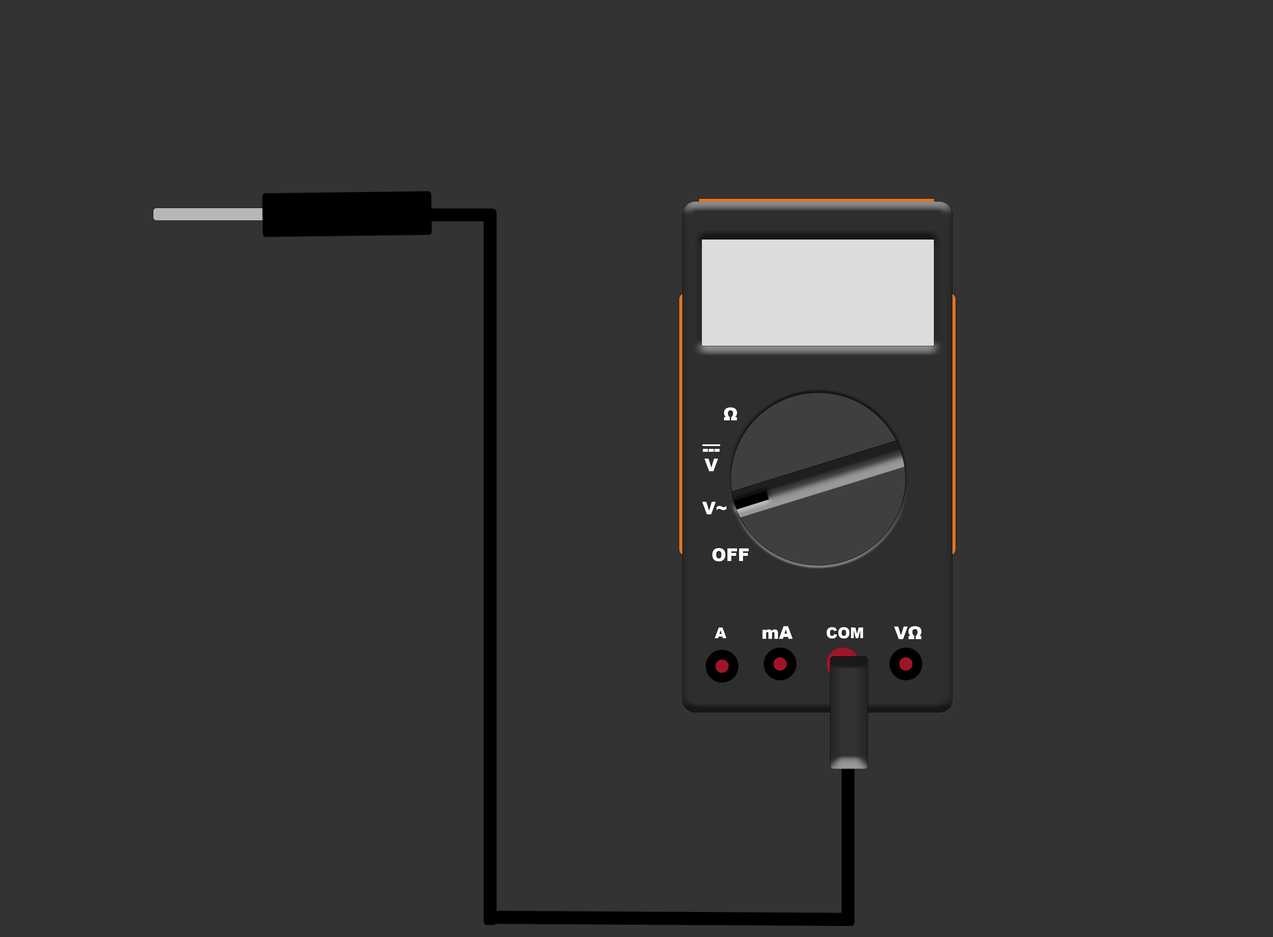
<style>
.page{position:relative;width:1273px;height:937px;background:#333333}
.page>*{position:absolute;margin:0}
.t1{font:17.6px "Arial-Black";color:#ffffff}
.t2{font:17.6px/5.4px "Arial-Black";color:#ffffff}
.t3{font:17.6px/10.8px "Arial-Black";color:#ffffff}
.t4{font:14.9px "Arial-Black";color:#ffffff}
</style>
<div class="page">
<p class="t1" style="left:724px;top:407px;width:13px;height:13px">Ω</p>
<p class="t2" style="left:702px;top:444px;width:18px;height:27px;text-align:center">—<br>---<br><br><span class="t3">V</span></p>
<p class="t1" style="left:702px;top:502px;width:24px;height:12px">V~</p>
<p class="t1" style="left:712px;top:548px;width:37px;height:13px">OFF</p>
<p class="t4" style="left:715px;top:627px;width:11px;height:11px">A</p>
<p class="t1" style="left:762px;top:626px;width:30px;height:13px">mA</p>
<p class="t4" style="left:826px;top:627px;width:37px;height:11px">COM</p>
<p class="t1" style="left:894px;top:626px;width:27px;height:13px">VΩ</p>
</div>
